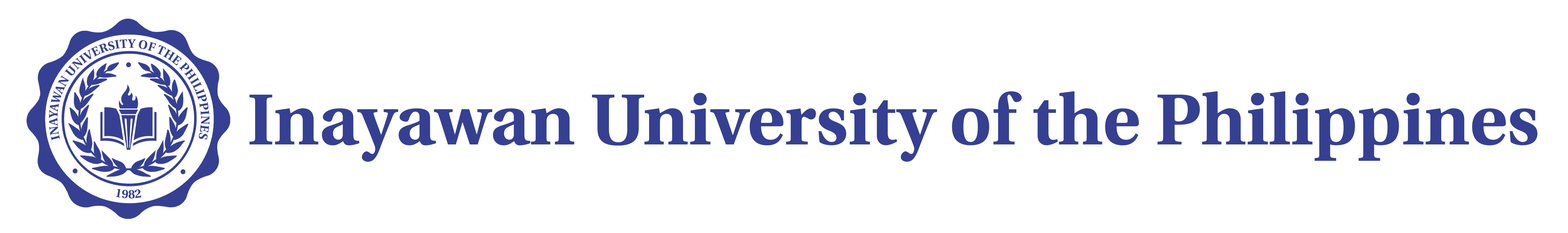
<style>
.page{position:relative;width:1568px;height:233px;background:#ffffff}
.page>*{position:absolute;margin:0}
.t1{font:71.7px "Heuristica-Bold";color:#354092}
.t2{font:12.2px "Heuristica-Bold";color:#354092}
</style>
<div class="page">
<p class="t1" style="left:249px;top:91px;width:1288px;height:71px">Inayawan University of the Philippines</p>
<p class="t2" style="left:116px;top:189px;width:25px;height:10px">1982</p>
</div>
